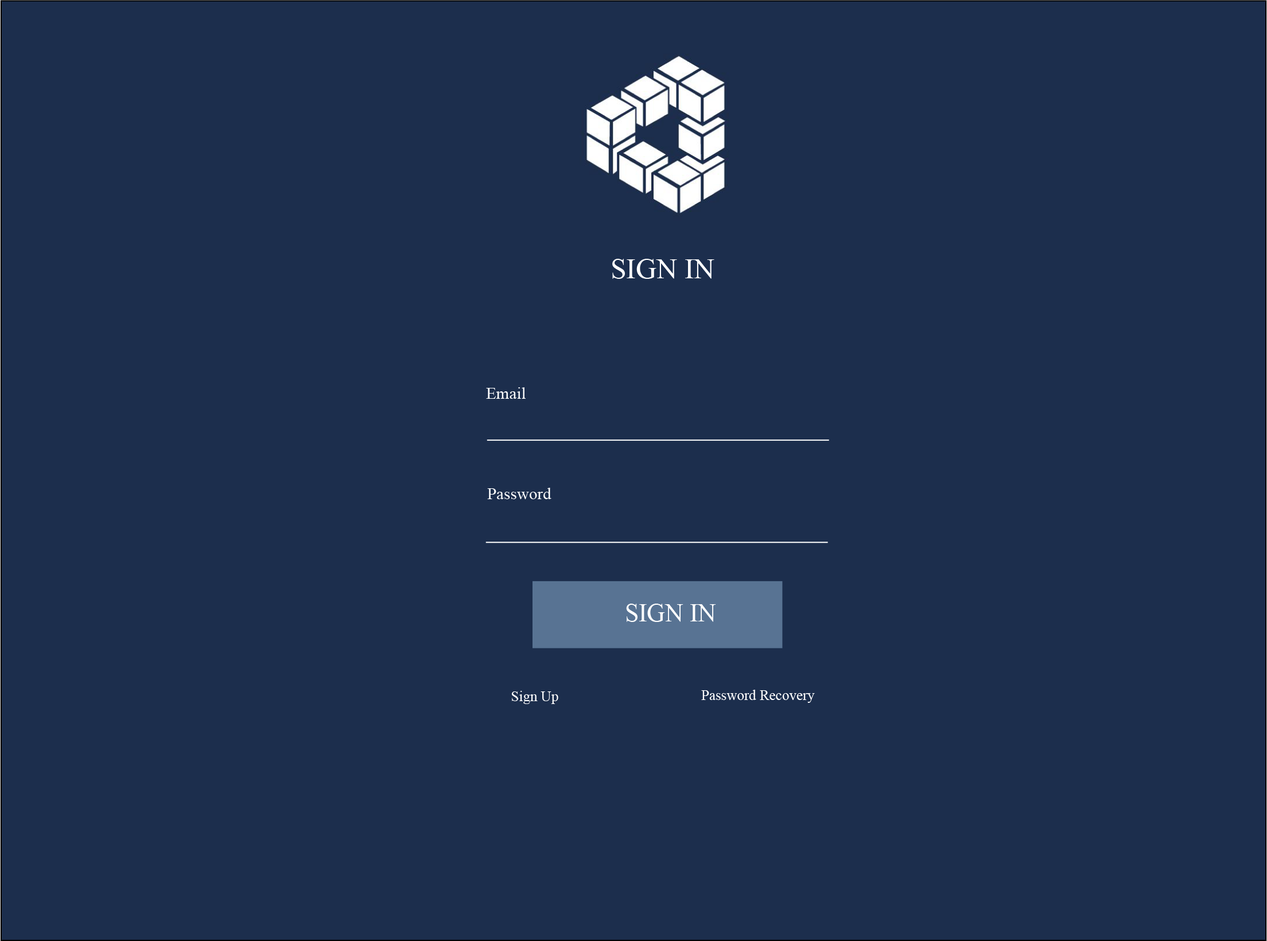
<style>
.page{position:relative;width:1267px;height:941px;background:#1c2e4d}
.page>*{position:absolute;margin:0}
.t1{font:28.7px "MyriadPro-Regular";color:#ffffff}
.t2{font:16.7px "MyriadPro-Regular";color:#ffffff}
.t3{font:25.1px "MyriadPro-Regular";color:#ffffff}
.t4{font:14.3px "MyriadPro-Regular";color:#ffffff}
</style>
<div class="page">
<p class="t1" style="left:612px;top:259px;width:102px;height:20px">SIGN IN</p>
<p class="t2" style="left:486px;top:387px;width:40px;height:12px">Email</p>
<p class="t2" style="left:487px;top:488px;width:64px;height:11px">Password</p>
<p class="t3" style="left:626px;top:604px;width:90px;height:18px">SIGN IN</p>
<p class="t4" style="left:701px;top:690px;width:114px;height:13px">Password Recovery</p>
<p class="t4" style="left:511px;top:691px;width:47px;height:13px">Sign Up</p>
</div>
